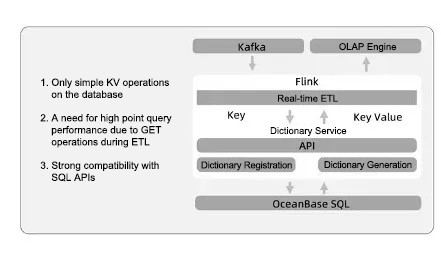
<style>
.page{position:relative;width:441px;height:258px;background:#f2f2f2}
.page>*{position:absolute;margin:0}
.t1{font:9.5px "ArialMT";color:#000000}
.t2{font:10px/12px "ArialMT";color:#000000}
.t3{font:9.5px "ArialMT";letter-spacing:-0.02em;color:#000000}
</style>
<div class="page">
<p class="t1" style="left:339px;top:43px;width:58px;height:9px">OLAP Engine</p>
<p class="t2" style="left:40px;top:78px;width:132px;height:104px">1. Only simple KV operations on the database <br>2. A need for high point query performance due to GET operations during ETL<br>3. Strong compatibility with SQL APIs</p>
<p class="t1" style="left:278px;top:94px;width:60px;height:8px">Real-time ETL</p>
<p class="t1" style="left:270px;top:127px;width:77px;height:9px">Dictionary Service</p>
<p class="t3" style="left:201px;top:161px;width:91px;height:10px">Dictionary Registration</p>
<p class="t3" style="left:324px;top:161px;width:88px;height:9px">Dictionary Generation</p>
</div>
